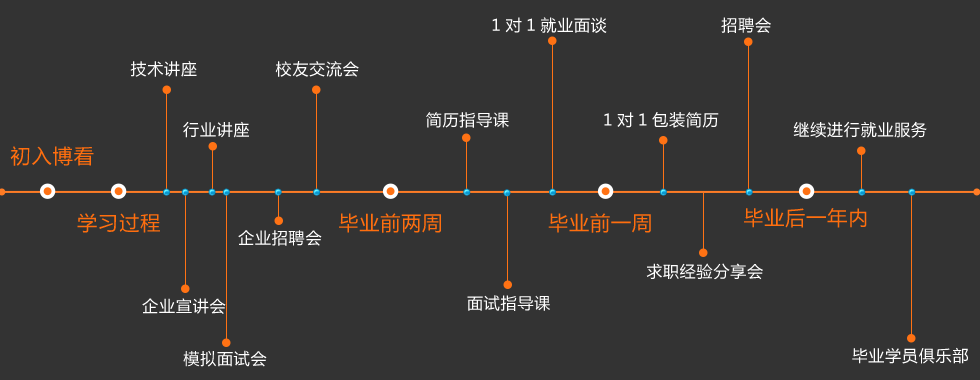
<style>
.page{position:relative;width:980px;height:380px;background:#333333}
.page>*{position:absolute;margin:0}
.t1{font:16px "MicrosoftYaHei";letter-spacing:0.05em;color:#ffffff}
.t2{font:20px "MicrosoftYaHei";letter-spacing:0.05em;color:#ff6e0e}
</style>
<div class="page">
<p class="t1" style="left:492px;top:17px;width:115px;height:16px">1对1就业面谈</p>
<p class="t1" style="left:721px;top:17px;width:50px;height:16px">招聘会</p>
<p class="t1" style="left:130px;top:61px;width:67px;height:16px">技术讲座</p>
<p class="t1" style="left:275px;top:61px;width:84px;height:16px">校友交流会</p>
<p class="t1" style="left:426px;top:112px;width:83px;height:16px">简历指导课</p>
<p class="t1" style="left:604px;top:112px;width:115px;height:16px">1对1包装简历</p>
<p class="t1" style="left:183px;top:121px;width:66px;height:17px">行业讲座</p>
<p class="t1" style="left:793px;top:121px;width:134px;height:17px">继续进行就业服务</p>
<p class="t2" style="left:10px;top:146px;width:84px;height:20px">初入博看</p>
<p class="t2" style="left:744px;top:208px;width:123px;height:20px">毕业后一年内</p>
<p class="t2" style="left:77px;top:213px;width:83px;height:20px">学习过程</p>
<p class="t2" style="left:339px;top:213px;width:102px;height:20px">毕业前两周</p>
<p class="t2" style="left:548px;top:213px;width:103px;height:20px">毕业前一周</p>
<p class="t1" style="left:238px;top:230px;width:84px;height:16px">企业招聘会</p>
<p class="t1" style="left:646px;top:263px;width:117px;height:17px">求职经验分享会</p>
<p class="t1" style="left:142px;top:298px;width:84px;height:16px">企业宣讲会</p>
<p class="t1" style="left:467px;top:295px;width:83px;height:16px">面试指导课</p>
<p class="t1" style="left:183px;top:350px;width:84px;height:17px">模拟面试会</p>
<p class="t1" style="left:852px;top:347px;width:116px;height:17px">毕业学员俱乐部</p>
</div>
